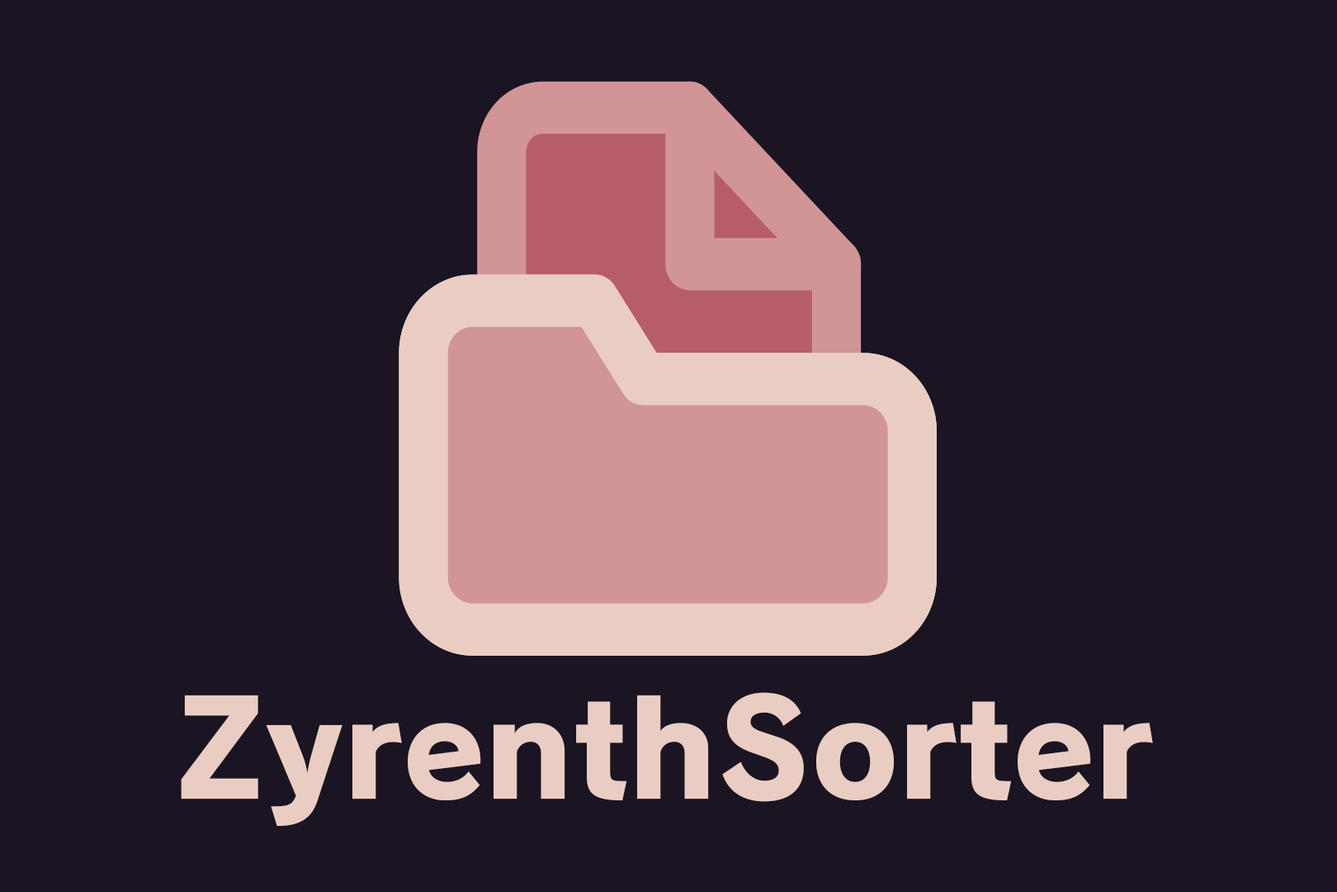
<style>
.page{position:relative;width:1337px;height:892px;background:#1a1423}
.page>*{position:absolute;margin:0}
.t1{font:132.4px "RodinPro-EB";letter-spacing:-0.004em;color:#eacdc2}
</style>
<div class="page">
<p class="t1" style="left:181px;top:692px;width:972px;height:134px">ZyrenthSorter</p>
</div>
